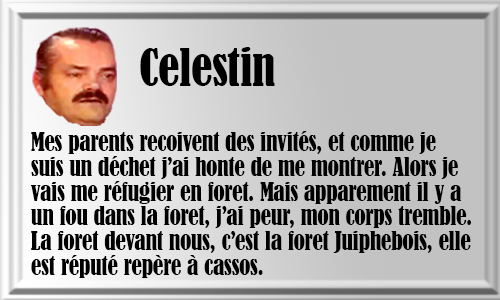
<style>
.page{position:relative;width:500px;height:300px}
.page>*{position:absolute;margin:0}
.t1{font:48.4px "BernardMT-Condensed";color:#000000}
.t2{font:23.5px/24.8px "BernardMT-Condensed";color:#000000}
</style>
<div class="page">
<p class="t1" style="left:140px;top:47px;width:135px;height:39px">Celestin</p>
<p class="t2" style="left:31px;top:131px;width:440px;height:147px">Mes parents recoivent des invités, et comme je <br>suis un déchet j’ai honte de me montrer. Alors je <br>vais me réfugier en foret. Mais apparement il y a <br>un fou dans la foret, j’ai peur, mon corps tremble.<br>La foret devant nous, c’est la foret Juiphebois, elle<br>est réputé repère à cassos.</p>
</div>
